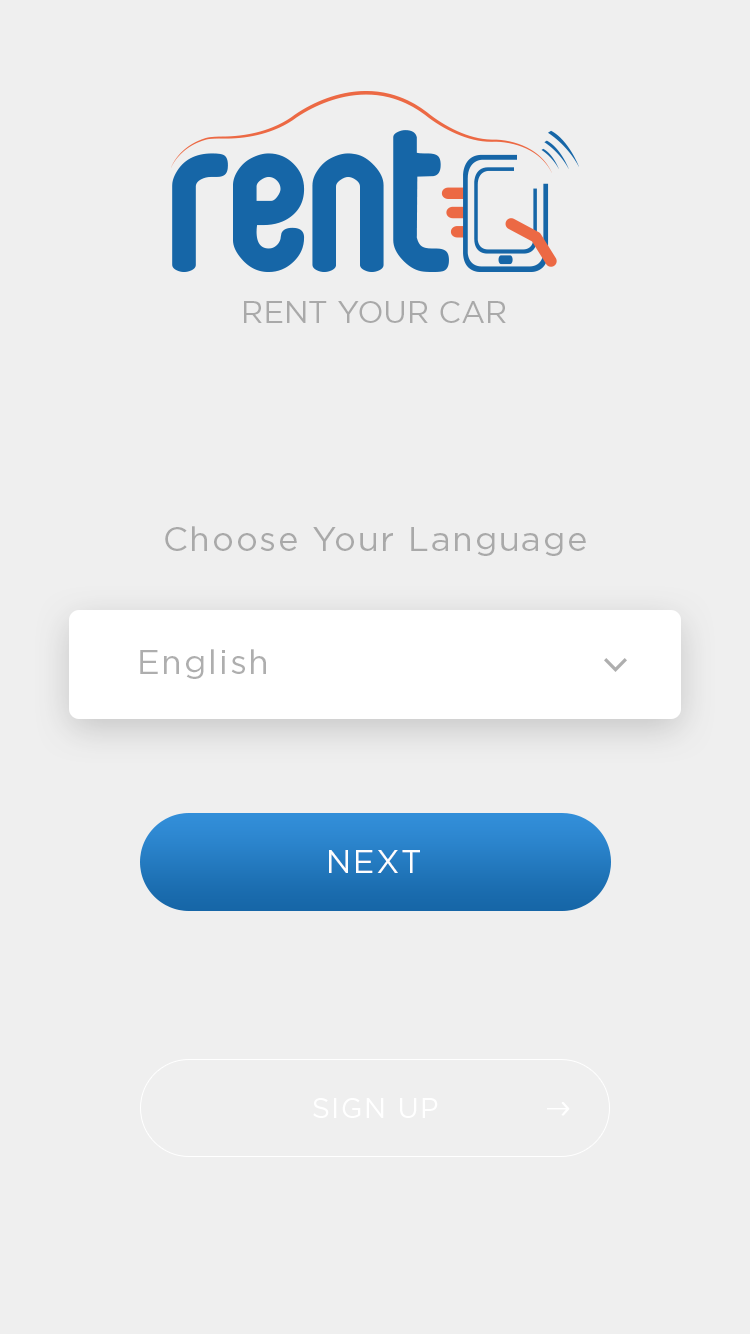
<style>
.page{position:relative;width:750px;height:1334px;background:#efefef}
.page>*{position:absolute;margin:0}
.t1{font:30.7px "Gotham-Book";color:#a9a9a9;text-transform:uppercase}
.t2{font:34px "Gotham-Book";letter-spacing:0.05em;color:#a9a9a9}
.t3{font:34px "Gotham-Book";letter-spacing:0.05em;color:#aeaeae}
.t4{font:32px "Gotham-Book";letter-spacing:0.05em;color:#fefefe;text-transform:uppercase}
.t5{font:28px "Gotham-Book";letter-spacing:0.05em;color:#ffffff;text-transform:uppercase}
</style>
<div class="page">
<p class="t1" style="left:244px;top:301px;width:262px;height:22px">rent your car</p>
<p class="t2" style="left:165px;top:526px;width:421px;height:30px">Choose Your Language</p>
<p class="t3" style="left:140px;top:649px;width:126px;height:30px">English</p>
<p class="t4" style="left:329px;top:850px;width:91px;height:23px">Next</p>
<p class="t5" style="left:313px;top:1098px;width:125px;height:20px">sign up</p>
</div>
